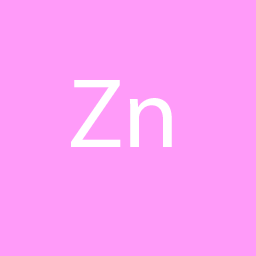
<style>
.page{position:relative;width:256px;height:256px;background:#ff9bf9}
.page>*{position:absolute;margin:0}
.t1{font:100px "MyriadPro-Regular";color:#ffffff}
</style>
<div class="page">
<p class="t1" style="left:71px;top:80px;width:101px;height:67px">Zn</p>
</div>
